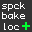
<style>
.page{position:relative;width:32px;height:32px;background:#333333}
.page>*{position:absolute;margin:0}
.t1{font:9px/10.4px "Monaco";letter-spacing:0.06em;color:#ffffff}
</style>
<div class="page">
<p class="t1" style="left:2px;top:2px;width:23px;height:28px">spck<br>bake<br>loc</p>
</div>
